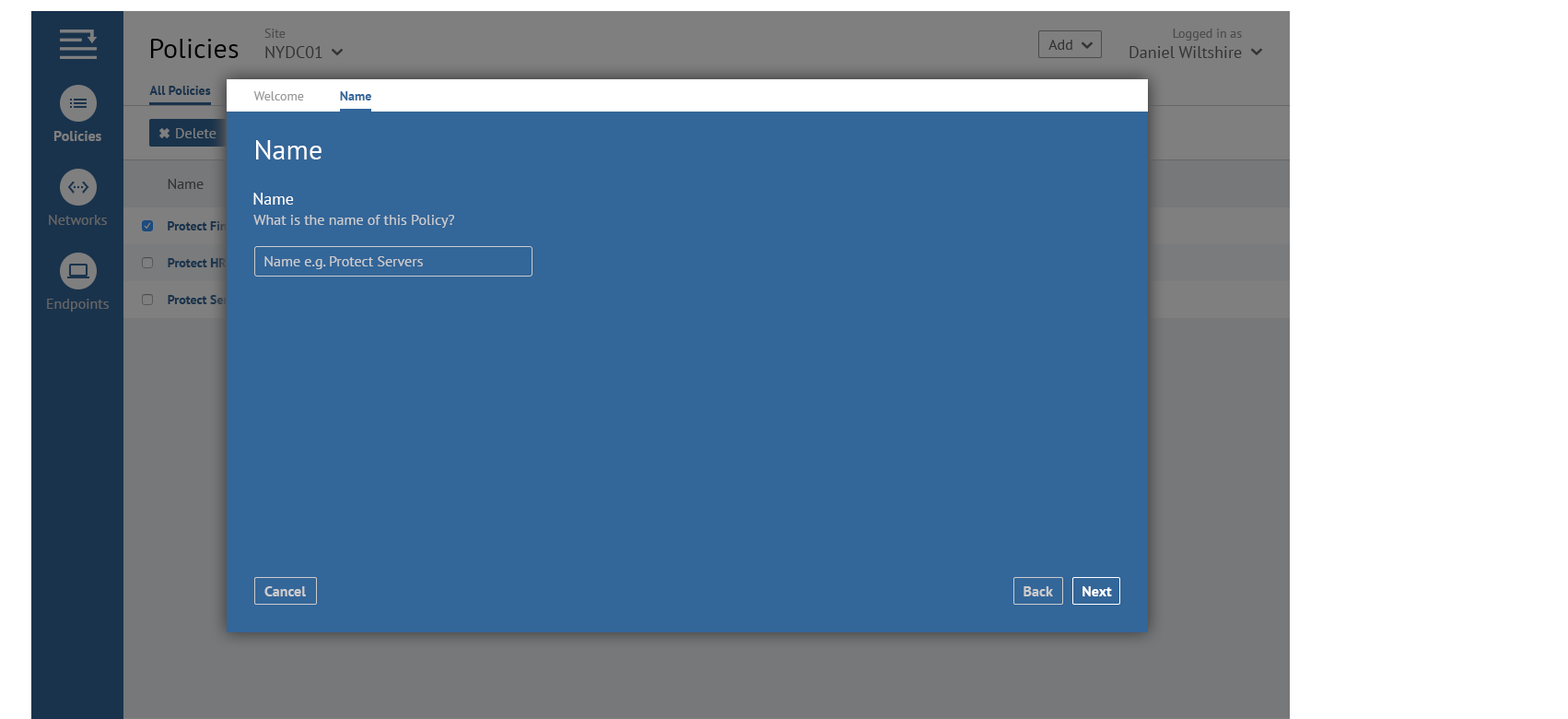
<style>
.page{position:relative;width:1568px;height:719px;background:#336699}
.page>*{position:absolute;margin:0}
.t1{font:16.6px "PTSans-Regular"}
.t2{font:12.9px "PTSans-Regular"}
.t3{font:16.8px "PTSans-Regular"}
.t4{font:13.1px "PTSans-Regular"}
.t5{font:27.6px "PTSans-Regular";color:#000000}
.t6{font:14.7px "PTSans-Regular";color:#333333}
.t7{font:12.8px "PTSans-Bold";color:#19334c}
.t8{font:12.8px "PTSans-Regular";color:#999999}
.t9{font:12.8px "PTSans-Bold";color:#336699}
.t10{font:14.7px "PTSans-Bold";color:#7f7f7f}
.t11{font:14.7px "PTSans-Regular";color:#7f7f7f}
.t12{font:27.6px "PTSans-Regular";color:#ffffff}
.t13{font:16.6px "PTSans-Regular";color:#ffffff}
.t14{font:14.7px "PTSans-Regular";color:#666666}
.t15{font:12.9px "PTSans-Bold"}
.t16{font:14.7px "PTSans-Regular";color:#cccccc}
.t17{font:12.9px "PTSans-Bold";color:#19334c}
.t18{font:14.7px "PTSans-Bold";color:#cccccc}
.t19{font:14.7px "PTSans-Bold";color:#ffffff}
</style>
<div class="page">
<p class="t1" style="left:264px;top:29px;width:58px;height:29px"><span class="t2">Site<br></span>NYDC01</p>
<p class="t3" style="left:1129px;top:29px;width:113px;height:29px;text-align:right"><span class="t4">Logged in as<br></span>Daniel Wiltshire</p>
<p class="t5" style="left:151px;top:39px;width:88px;height:19px">Policies</p>
<p class="t6" style="left:1048px;top:40px;width:24px;height:10px">Add</p>
<p class="t7" style="left:149px;top:86px;width:62px;height:9px">All Policies</p>
<p class="t8" style="left:253px;top:91px;width:51px;height:9px">Welcome</p>
<p class="t9" style="left:340px;top:91px;width:31px;height:9px">Name</p>
<p class="t10" style="left:53px;top:131px;width:48px;height:10px">Policies</p>
<p class="t11" style="left:176px;top:128px;width:40px;height:10px">Delete</p>
<p class="t12" style="left:256px;top:140px;width:66px;height:19px">Name</p>
<p class="t6" style="left:168px;top:179px;width:36px;height:10px">Name</p>
<p class="t13" style="left:253px;top:193px;width:41px;height:12px">Name</p>
<p class="t14" style="left:49px;top:215px;width:58px;height:10px">Networks</p>
<p class="t15" style="left:168px;top:221px;width:84px;height:9px">Protect Finance</p>
<p class="t16" style="left:253px;top:215px;width:201px;height:13px">What is the name of this Policy?</p>
<p class="t17" style="left:168px;top:258px;width:59px;height:9px">Protect HR</p>
<p class="t16" style="left:264px;top:256px;width:159px;height:13px">Name e.g. Protect Servers</p>
<p class="t14" style="left:47px;top:298px;width:62px;height:13px">Endpoints</p>
<p class="t15" style="left:168px;top:295px;width:83px;height:9px">Protect Servers</p>
<p class="t18" style="left:264px;top:586px;width:42px;height:10px">Cancel</p>
<p class="t18" style="left:1024px;top:586px;width:29px;height:10px">Back</p>
<p class="t19" style="left:1082px;top:586px;width:30px;height:10px">Next</p>
</div>
